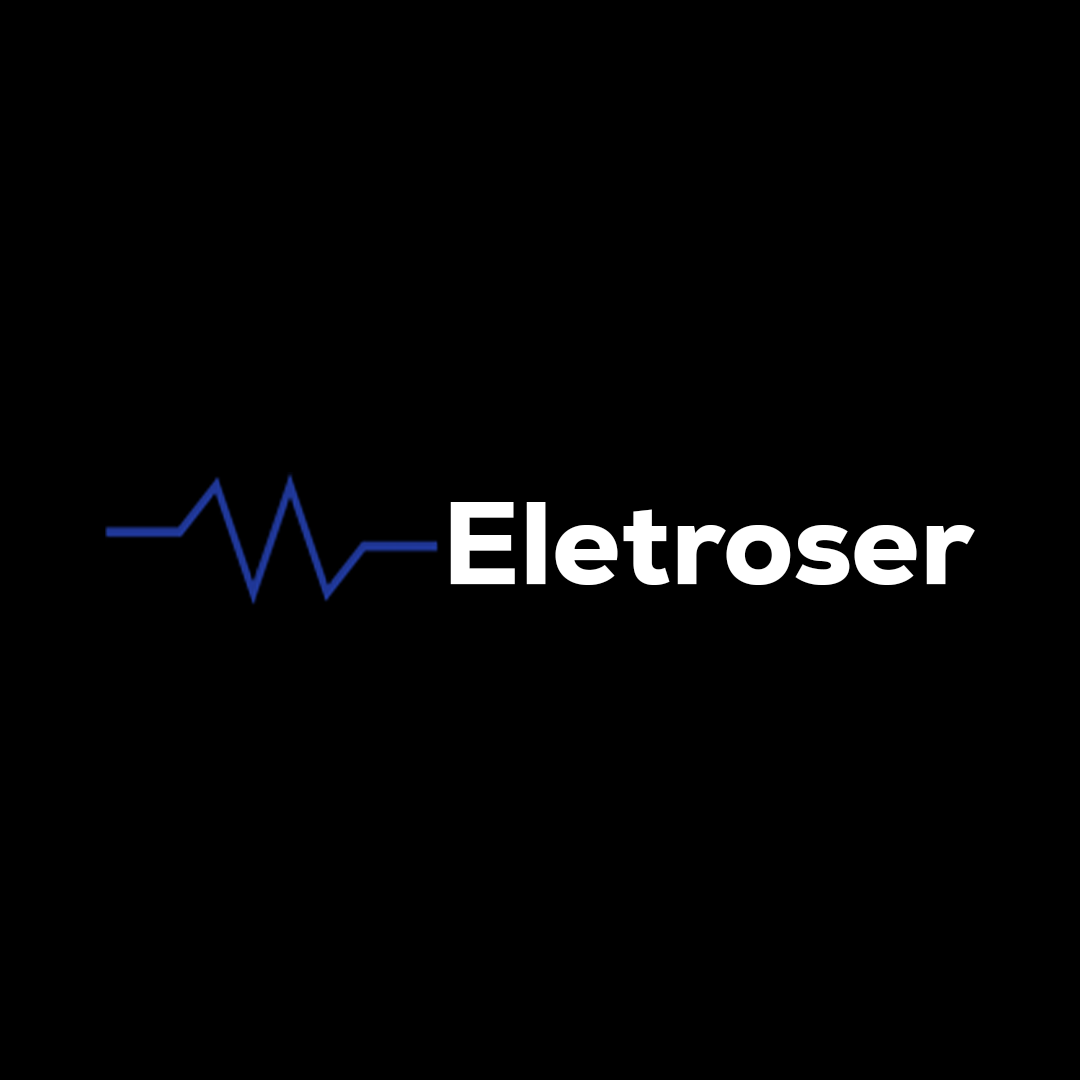
<style>
.page{position:relative;width:1080px;height:1080px;background:#000000}
.page>*{position:absolute;margin:0}
.t1{font:117px "Nexa-Heavy";color:#ffffff}
</style>
<div class="page">
<p class="t1" style="left:450px;top:502px;width:525px;height:83px">Eletroser</p>
</div>
